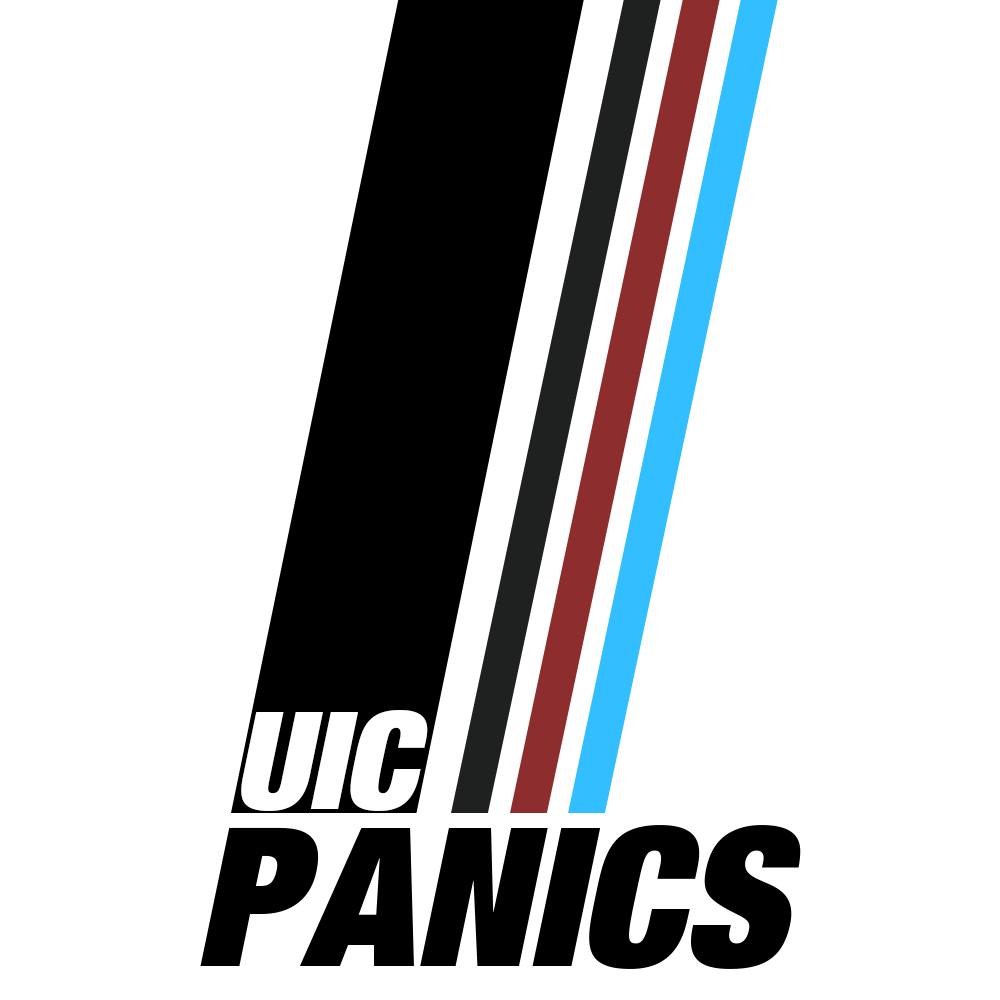
<style>
.page{position:relative;width:1000px;height:1000px;background:#ffffff}
.page>*{position:absolute;margin:0}
.t1{font:135.2px "HelveticaNeueLTPro-XBlkCnO";color:#ffffff}
.t2{font:193.9px "HelveticaNeueLTPro-XBlkCnO";color:#000000}
</style>
<div class="page">
<p class="t1" style="left:241px;top:710px;width:187px;height:101px">UIC</p>
<p class="t2" style="left:200px;top:825px;width:601px;height:144px">PANICS</p>
</div>
